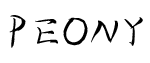
<style>
.page{position:relative;width:150px;height:63px;background:#ffffff}
.page>*{position:absolute;margin:0}
.t1{font:41.6px "38--Regular";color:#000000;text-transform:uppercase}
</style>
<div class="page">
<p class="t1" style="left:9px;top:15px;width:134px;height:33px">peony</p>
</div>
